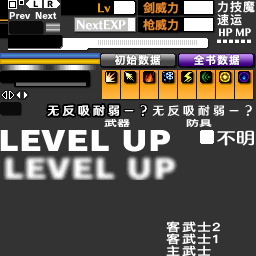
<style>
.page{position:relative;width:256px;height:256px;background:#333333}
.page>*{position:absolute;margin:0}
.t1{font:12px "DFKingGothicSC14-Semibold";letter-spacing:0.005em;color:#e4892f}
.t2{font:12px/12.7px "DFKingGothicSC14-Semibold";letter-spacing:0.085em;color:#ffffff}
.t3{font:10.7px "DFKingGothicSC14-Semibold";letter-spacing:0.105em;color:#ffffff}
.t4{font:12px "HYWenHei-FEW";letter-spacing:0.265em;color:#ffffff}
.t5{font:8.4px "DFKingGothicSC14-Semibold";letter-spacing:0.005em;color:#ffffff;scale:1.56 1}
.t6{font:11.3px/12px "DFKingGothicSC14-Semibold";letter-spacing:0.085em;color:#ffffff;scale:1.25 1}
</style>
<div class="page">
<p class="t1" style="left:143px;top:2px;width:35px;height:12px">剑威力</p>
<p class="t2" style="left:217px;top:1px;width:38px;height:25px">力技魔<br>速运</p>
<p class="t1" style="left:143px;top:19px;width:35px;height:12px">枪威力</p>
<p class="t3" style="left:115px;top:54px;width:46px;height:11px">初始数据</p>
<p class="t3" style="left:193px;top:54px;width:47px;height:11px">全书数据</p>
<p class="t4" style="left:47px;top:105px;width:72px;height:11px">无反吸耐弱</p>
<p class="t4" style="left:152px;top:105px;width:72px;height:11px">无反吸耐弱</p>
<p class="t5" style="left:104px;top:119px;width:26px;height:8px">武器</p>
<p class="t5" style="left:186px;top:119px;width:26px;height:8px">防具</p>
<p class="t6" style="left:166px;top:221px;width:54px;height:36px">客武士2<br>客武士1<br>主武士</p>
</div>
